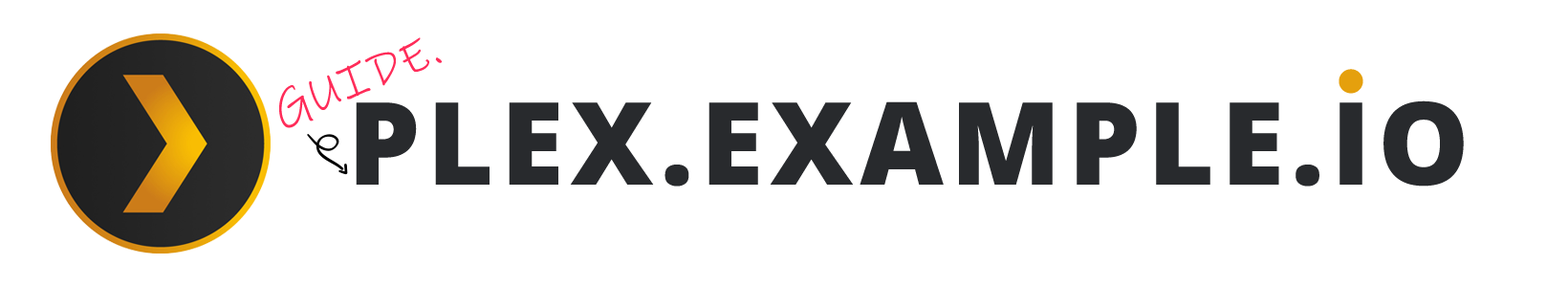
<style>
.page{position:relative;width:1568px;height:287px;background:#ffffff}
.page>*{position:absolute;margin:0}
.t1{font:45.9px "InkFree";letter-spacing:0.06em;color:#ff2c59}
.t2{font:114.7px "OpenSansRoman-ExtraBold";letter-spacing:0.06em;color:#282a2d}
</style>
<div class="page">
<p class="t1" style="left:279px;top:37px;width:164px;height:91px;rotate:-21deg">GUIDE.</p>
<p class="t2" style="left:356px;top:100px;width:1108px;height:86px">PLEX.EXAMPLE.IO</p>
</div>
